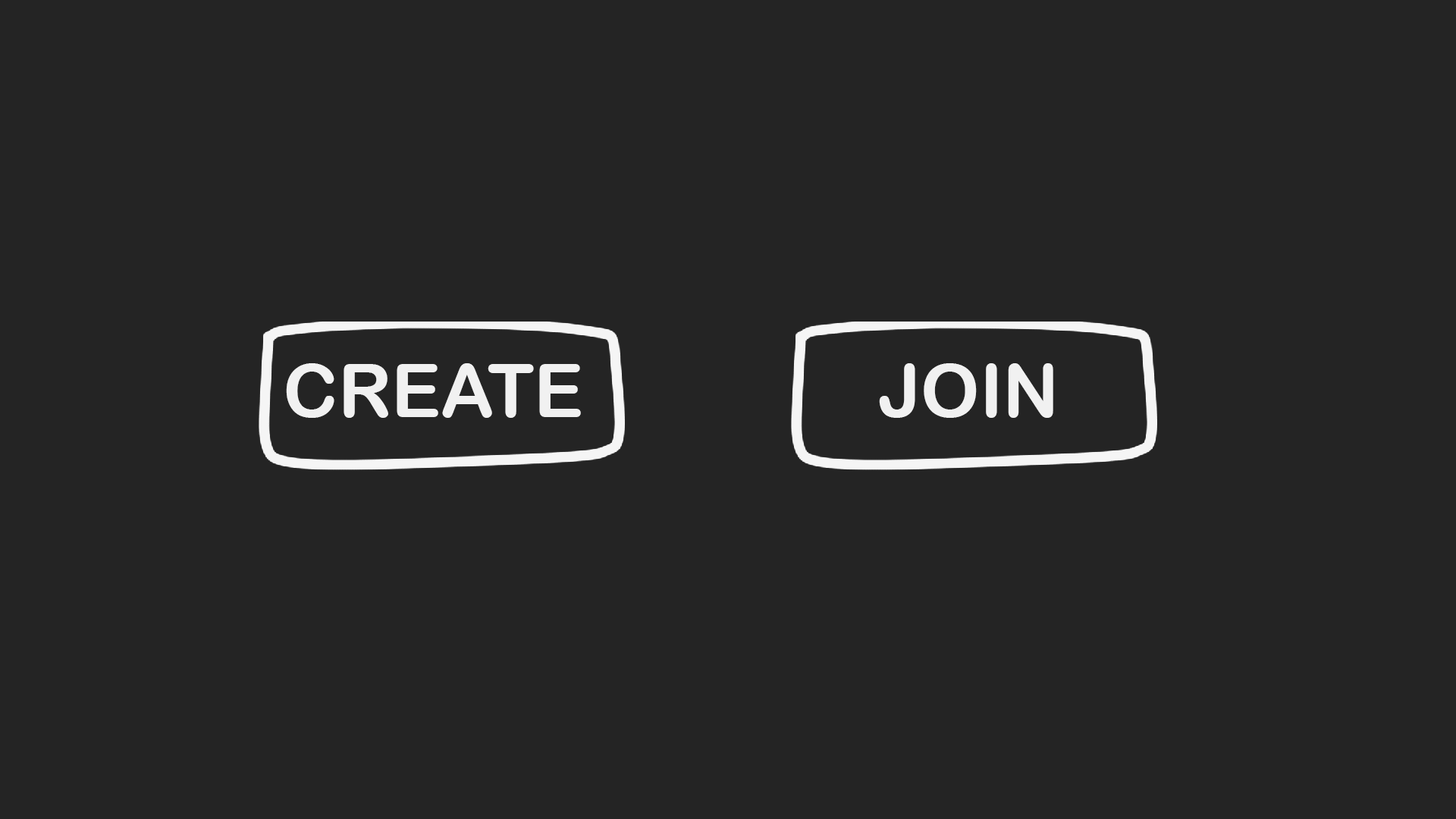
<style>
.page{position:relative;width:1456px;height:819px;background:#242424}
.page>*{position:absolute;margin:0}
.t1{font:74.2px "ArialRoundedMTBold";color:#f1f1f1}
</style>
<div class="page">
<p class="t1" style="left:286px;top:363px;width:295px;height:55px">CREATE</p>
<p class="t1" style="left:879px;top:363px;width:174px;height:55px">JOIN</p>
</div>
